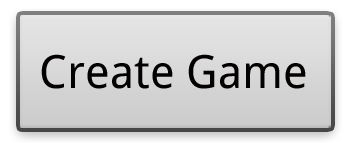
<style>
.page{position:relative;width:347px;height:143px}
.page>*{position:absolute;margin:0}
.t1{font:45.8px "DroidSans";color:#030000}
</style>
<div class="page">
<p class="t1" style="left:41px;top:54px;width:265px;height:35px">Create Game</p>
</div>
